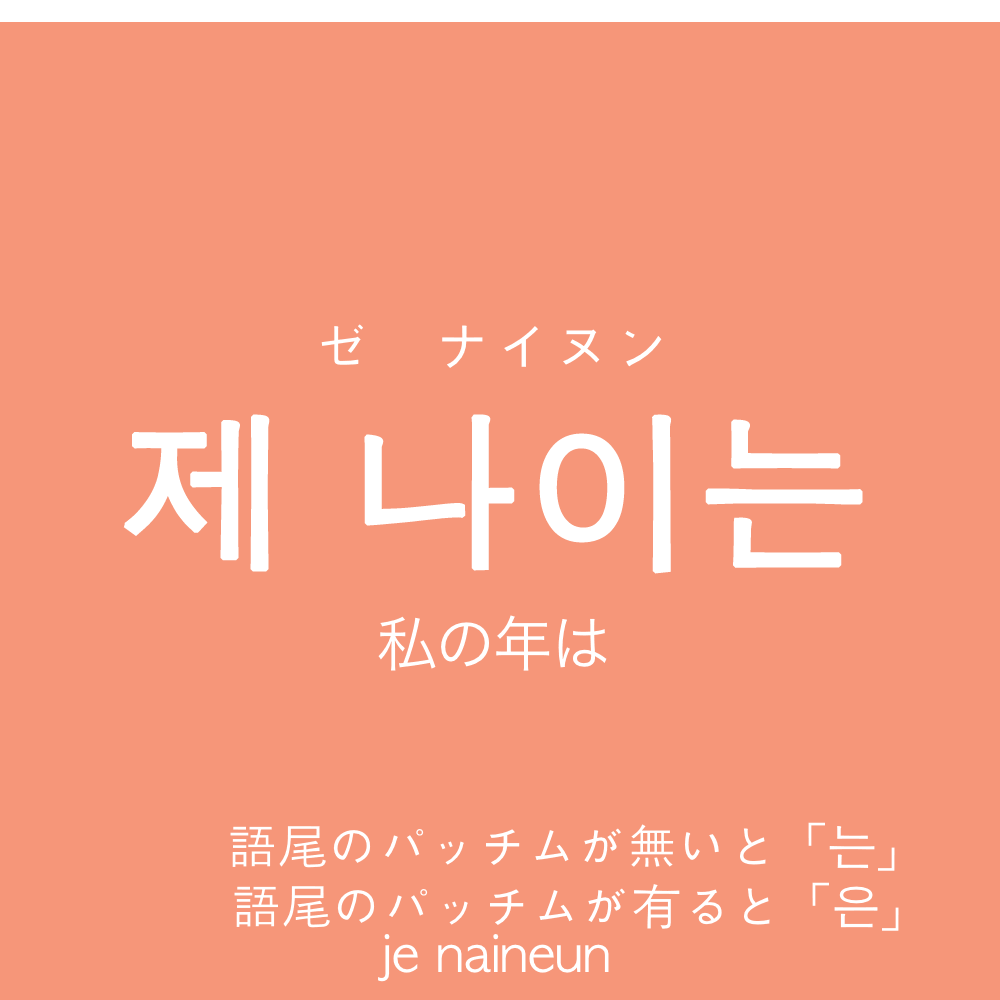
<style>
.page{position:relative;width:1000px;height:1000px;background:#f69679}
.page>*{position:absolute;margin:0}
.t1{font:60px "AppleGothic";color:#ffffff;text-transform:uppercase}
.t2{font:170px "AppleGothic";color:#ffffff;font-weight:bold}
.t3{font:60px "HiraKakuProN-W3";color:#ffffff}
.t4{font:50px "AppleGothic";color:#ffffff}
</style>
<div class="page">
<p class="t1" style="left:321px;top:324px;width:341px;height:44px">ゼ　ナイヌン</p>
<p class="t2" style="left:123px;top:414px;width:740px;height:160px">제 나이는</p>
<p class="t3" style="left:378px;top:615px;width:229px;height:56px">私の年は</p>
<p class="t4" style="left:230px;top:822px;width:665px;height:49px">語尾のパッチムが無いと「는」</p>
<p class="t4" style="left:234px;top:882px;width:665px;height:49px">語尾のパッチムが有ると「은」</p>
<p class="t4" style="left:378px;top:934px;width:231px;height:48px">je naineun</p>
</div>
